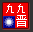
<style>
.page{position:relative;width:33px;height:32px;background:#f20000}
.page>*{position:absolute;margin:0}
.t1{font:10.4px "SimSun";color:#ffffff}
.t2{font:11.7px "SimSun";color:#ffffff}
</style>
<div class="page">
<p class="t1" style="left:6px;top:4px;width:19px;height:9px">九九</p>
<p class="t2" style="left:16px;top:15px;width:11px;height:12px">晋</p>
</div>
